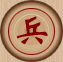
<style>
.page{position:relative;width:63px;height:62px}
.page>*{position:absolute;margin:0}
.t1{font:36px "HYh1gf";color:#820000}
</style>
<div class="page">
<p class="t1" style="left:16px;top:16px;width:32px;height:29px">兵</p>
</div>
